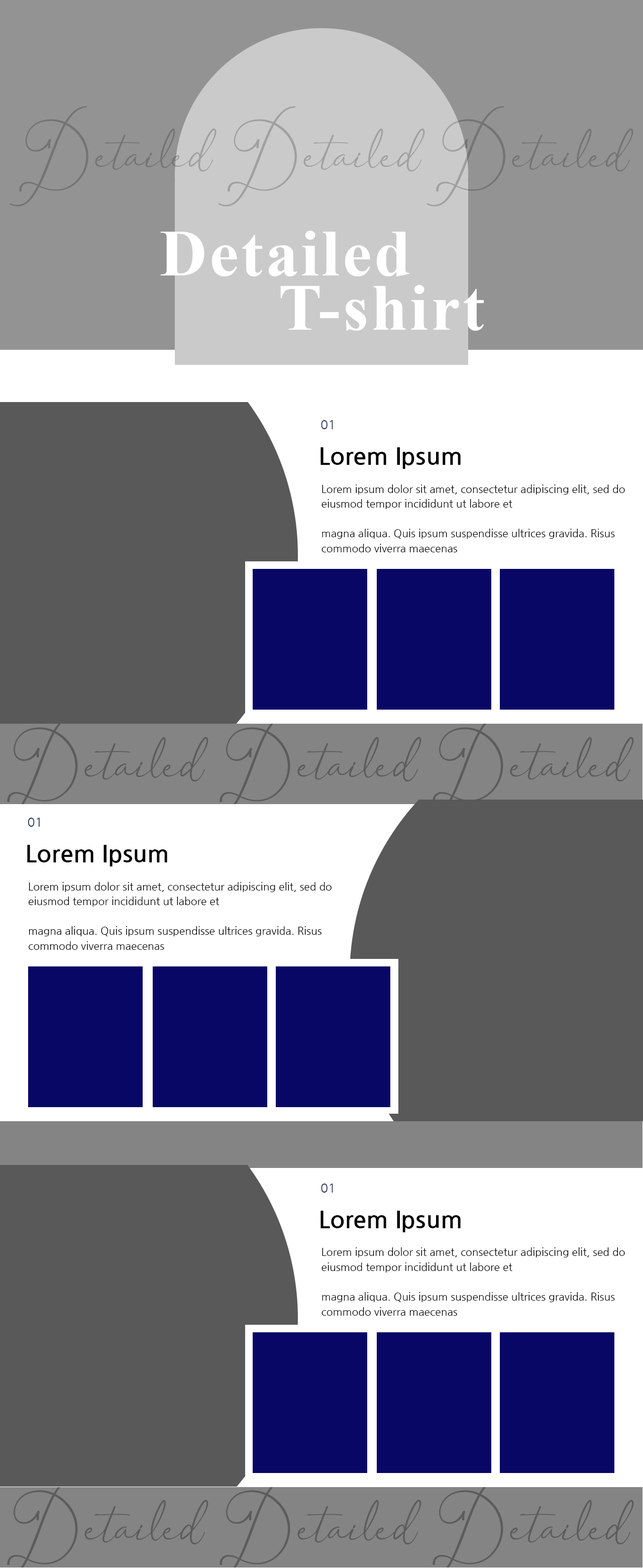
<style>
.page{position:relative;width:643px;height:1568px;background:#595959}
.page>*{position:absolute;margin:0}
.t1{font:58.2px "AsmelinaHarleyRegular";color:#a0a0a0}
.t2{font:65.4px/54.1px "TimesNewRomanPS-BoldMT";letter-spacing:0.04em;color:#ffffff}
.t3{font:12.6px "NanumGothic";color:#253259}
.t4{font:24.1px "NanumGothicBold";color:#000001}
.t5{font:10.6px/14.9px "NanumGothic";color:#000000}
</style>
<div class="page">
<p class="t1" style="left:218px;top:106px;width:207px;height:101px;text-align:center">Detailed</p>
<p class="t2" style="left:160px;top:231px;width:324px;height:100px;text-align:center">Detailed<br>         T-shirt</p>
<p class="t3" style="left:321px;top:420px;width:12px;height:9px">01</p>
<p class="t4" style="left:321px;top:447px;width:140px;height:22px">Lorem Ipsum</p>
<p class="t5" style="left:322px;top:484px;width:303px;height:68px">Lorem ipsum dolor sit amet, consectetur adipiscing elit, sed do eiusmod tempor incididunt ut labore et <br><br>magna aliqua. Quis ipsum suspendisse ultrices gravida. Risus commodo viverra maecenas</p>
<p class="t3" style="left:28px;top:818px;width:12px;height:9px">01</p>
<p class="t4" style="left:27px;top:845px;width:140px;height:21px">Lorem Ipsum</p>
<p class="t5" style="left:29px;top:882px;width:303px;height:68px">Lorem ipsum dolor sit amet, consectetur adipiscing elit, sed do eiusmod tempor incididunt ut labore et <br><br>magna aliqua. Quis ipsum suspendisse ultrices gravida. Risus commodo viverra maecenas</p>
<p class="t3" style="left:321px;top:1184px;width:12px;height:9px">01</p>
<p class="t4" style="left:321px;top:1211px;width:140px;height:21px">Lorem Ipsum</p>
<p class="t5" style="left:322px;top:1247px;width:303px;height:69px">Lorem ipsum dolor sit amet, consectetur adipiscing elit, sed do eiusmod tempor incididunt ut labore et <br><br>magna aliqua. Quis ipsum suspendisse ultrices gravida. Risus commodo viverra maecenas</p>
</div>
